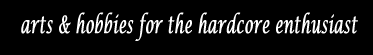
<style>
.page{position:relative;width:373px;height:55px;background:#000000}
.page>*{position:absolute;margin:0}
.t1{font:24px "LucidaCalligraphy-Italic";color:#ffffff;font-weight:bold;scale:0.6 1}
</style>
<div class="page">
<p class="t1" style="left:21px;top:12px;width:337px;height:29px">arts &amp; hobbies for the hardcore enthusiast</p>
</div>
